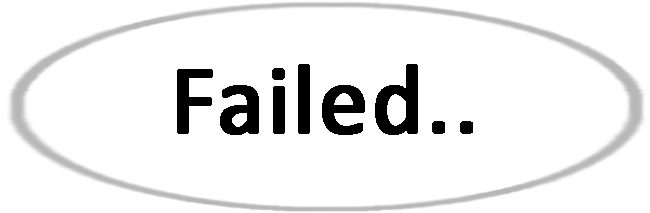
<style>
.page{position:relative;width:650px;height:213px;background:#ffffff}
.page>*{position:absolute;margin:0}
.t1{font:100px "Calibri";color:#000000;font-weight:bold}
</style>
<div class="page">
<p class="t1" style="left:177px;top:64px;width:296px;height:71px">Failed..</p>
</div>
